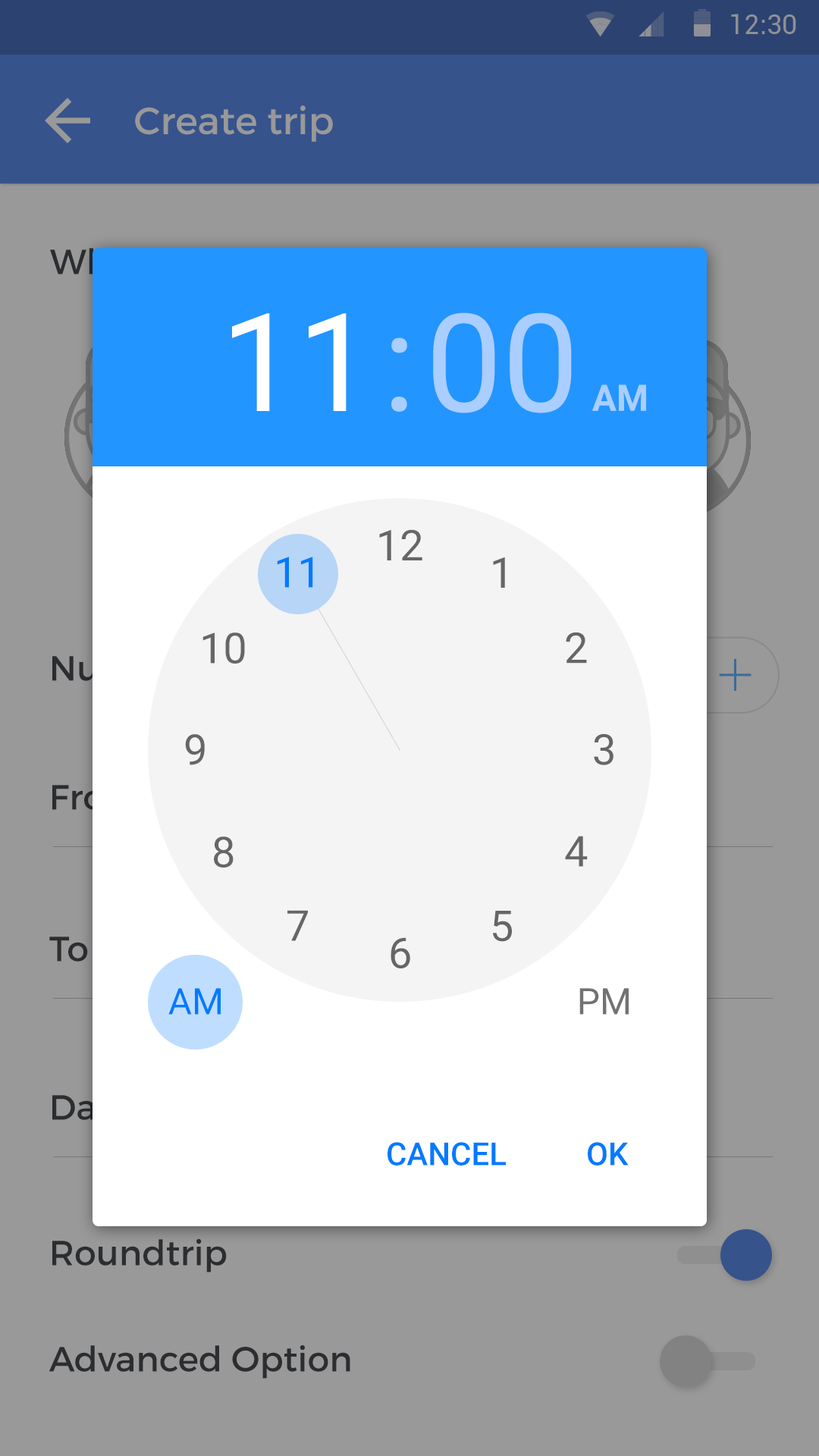
<style>
.page{position:relative;width:819px;height:1456px;background:#999999}
.page>*{position:absolute;margin:0}
.t1{font:136.5px "Roboto-Regular";color:#ffffff}
.t2{font:136.5px "Roboto-Regular";color:#aaceff}
.t3{font:36.4px "Roboto-Bold";color:#aaceff}
.t4{font:42.5px "Roboto-Regular";color:#666666}
.t5{font:42.5px "Roboto-Regular";color:#007aff}
.t6{font:36.4px "Roboto-Regular";color:#007aff}
.t7{font:36.4px "Roboto-Regular";color:#727272}
.t8{font:31.8px "Roboto-Medium";color:#007aff}
</style>
<div class="page">
<p class="t1" style="left:232px;top:313px;width:115px;height:98px">11</p>
<p class="t2" style="left:433px;top:312px;width:139px;height:101px">00</p>
<p class="t2" style="left:391px;top:337px;width:16px;height:75px">:</p>
<p class="t3" style="left:592px;top:384px;width:54px;height:27px">AM</p>
<p class="t4" style="left:379px;top:529px;width:43px;height:31px">12</p>
<p class="t5" style="left:277px;top:557px;width:36px;height:31px">11</p>
<p class="t4" style="left:493px;top:557px;width:12px;height:31px">1</p>
<p class="t4" style="left:202px;top:632px;width:43px;height:32px">10</p>
<p class="t4" style="left:566px;top:632px;width:21px;height:32px">2</p>
<p class="t4" style="left:185px;top:734px;width:20px;height:31px">9</p>
<p class="t4" style="left:594px;top:734px;width:19px;height:31px">3</p>
<p class="t4" style="left:214px;top:836px;width:20px;height:32px">8</p>
<p class="t4" style="left:565px;top:836px;width:23px;height:31px">4</p>
<p class="t4" style="left:287px;top:910px;width:21px;height:31px">7</p>
<p class="t4" style="left:493px;top:911px;width:19px;height:31px">5</p>
<p class="t4" style="left:391px;top:937px;width:19px;height:31px">6</p>
<p class="t6" style="left:168px;top:988px;width:53px;height:27px">AM</p>
<p class="t7" style="left:579px;top:988px;width:50px;height:27px">PM</p>
<p class="t8" style="left:388px;top:1142px;width:118px;height:24px">CANCEL</p>
<p class="t8" style="left:588px;top:1142px;width:41px;height:24px">OK</p>
</div>
